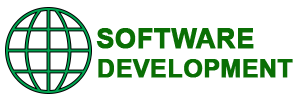
<style>
.page{position:relative;width:300px;height:100px;background:#ffffff}
.page>*{position:absolute;margin:0}
.t1{font:27px "Arial-BoldMT";color:#0a6f05;font-weight:bold}
.t2{font:24.8px "Arial-BoldMT";color:#0a6f05;font-weight:bold}
</style>
<div class="page">
<p class="t1" style="left:96px;top:28px;width:158px;height:21px">SOFTWARE</p>
<p class="t2" style="left:98px;top:59px;width:195px;height:19px">DEVELOPMENT</p>
</div>
